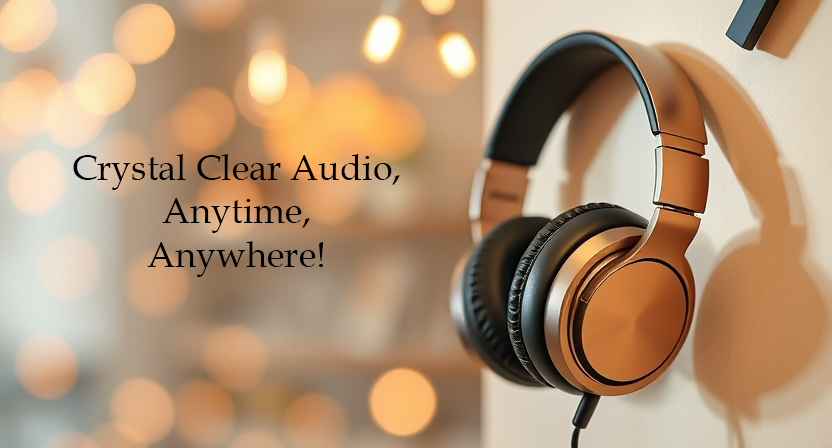
<style>
.page{position:relative;width:832px;height:448px}
.page>*{position:absolute;margin:0}
.t1{font:36px "BookAntiqua";color:#000000}
</style>
<div class="page">
<p class="t1" style="left:73px;top:154px;width:327px;height:123px;text-align:center">Crystal Clear Audio, Anytime, <br>Anywhere!</p>
</div>
